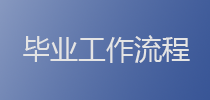
<style>
.page{position:relative;width:210px;height:100px}
.page>*{position:absolute;margin:0}
.t1{font:28px "MicrosoftYaHei";color:#e4e4e4}
</style>
<div class="page">
<p class="t1" style="left:23px;top:35px;width:167px;height:28px">毕业工作流程</p>
</div>
